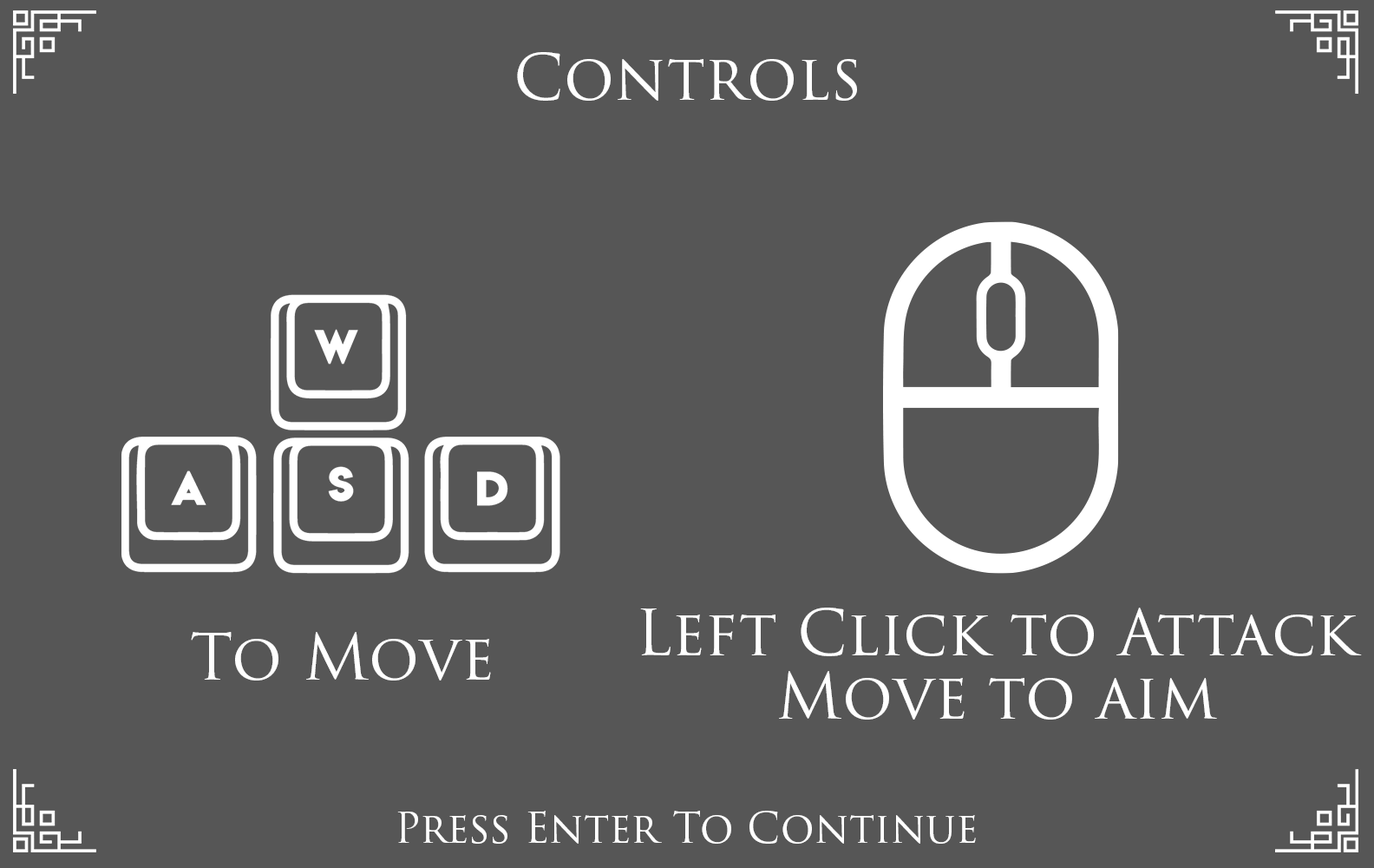
<style>
.page{position:relative;width:1374px;height:868px;background:#565656}
.page>*{position:absolute;margin:0}
.t1{font:62.5px "TrajanPro3-Regular";color:#ffffff}
.t2{font:41.6px "TrajanPro3-Regular";color:#ffffff}
</style>
<div class="page">
<p class="t1" style="left:517px;top:52px;width:340px;height:49px">Controls</p>
<p class="t1" style="left:640px;top:607px;width:722px;height:49px">Left Click to Attack</p>
<p class="t1" style="left:191px;top:632px;width:300px;height:48px">To Move</p>
<p class="t1" style="left:779px;top:671px;width:438px;height:48px">Move to aim</p>
<p class="t2" style="left:397px;top:810px;width:579px;height:33px">Press Enter To Continue</p>
</div>
